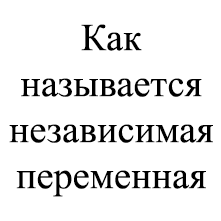
<style>
.page{position:relative;width:221px;height:221px;background:#ffffff}
.page>*{position:absolute;margin:0}
.t1{font:38.3px "TimesNewRomanPSMT";color:#000000}
</style>
<div class="page">
<p class="t1" style="left:9px;top:24px;width:204px;height:173px;text-align:center">Как<br>называется<br>независимая<br>переменная</p>
</div>
